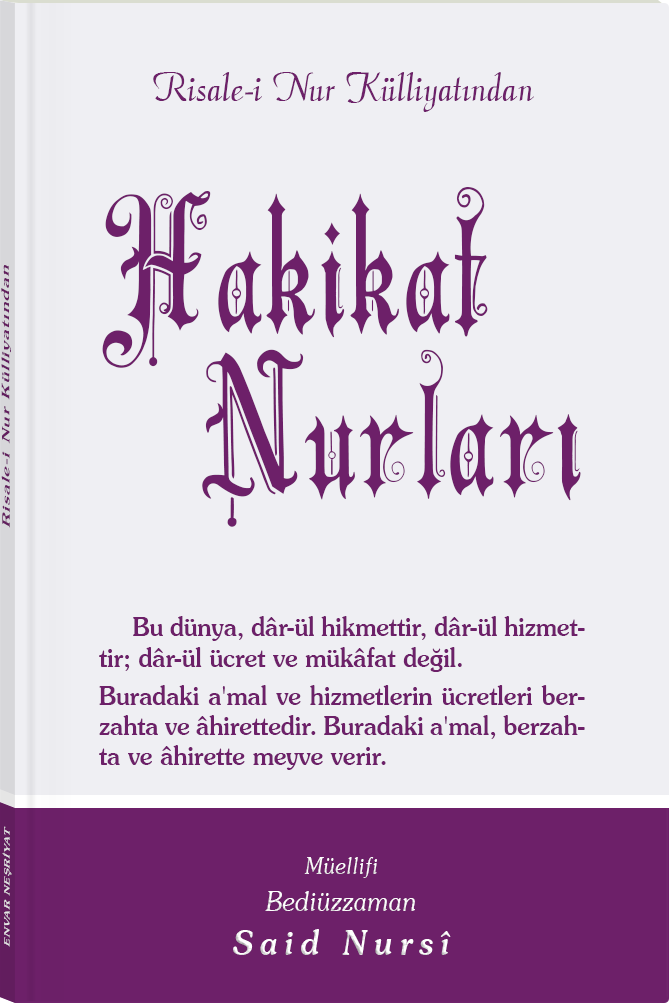
<style>
.page{position:relative;width:669px;height:1003px;background:#efeff3}
.page>*{position:absolute;margin:0}
.t1{font:45.3px "Barla © 072 Aria ScriptScriptSSi";color:#6d2069;scale:0.94 1}
.t2{font:183px/163.3px "Barla © 001 Liva Nur";letter-spacing:-0.001em;color:#6d2069;scale:0.92 1}
.t3{font:11.4px "Souvenir-Medium";letter-spacing:0.08em;color:#6d2069;scale:1.65 1}
.t4{font:25.9px/30.2px "Souvenir-Medium";color:#6d2069;scale:0.92 1}
.t5{font:25.9px/38.4px "Souvenir-Medium";color:#6d2069;scale:0.92 1}
.t6{font:8.3px "Souvenir-Medium";letter-spacing:0.08em;color:#e5e5e5;scale:1.43 1}
.t7{font:27.1px/37.8px "Souvenir-LightItalic";color:#ffffff;scale:0.92 1}
.t8{font:22.8px/39.8px "Souvenir-LightItalic";color:#ffffff;scale:0.92 1}
.t9{font:33.9px/43.8px "Souvenir-MediumItalic";letter-spacing:0.2em;color:#ffffff;scale:0.92 1}
</style>
<div class="page">
<p class="t1" style="left:153px;top:72px;width:381px;height:40px">Risale-i Nur Külliyatından</p>
<p class="t2" style="left:102px;top:187px;width:479px;height:340px;text-align:center">Hakikat<br>      Nurları</p>
<p class="t3" style="left:1px;top:265px;width:10px;height:263px;rotate:-90deg">Risale-i Nur Külliyatından</p>
<p class="t4" style="left:99px;top:616px;width:486px;height:154px;text-align:justify">Bu dünya, dâr-ül hikmettir, dâr-ül hizmettir; dâr-ül ücret ve mükâfat değil.     <span class="t5">Buradaki </span>a'mal ve hizmetlerin ücretleri berzahta ve âhirettedir. Buradaki a'mal, berzahta ve âhirette meyve verir.</p>
<p class="t6" style="left:2px;top:826px;width:10px;height:121px;rotate:-90deg">ENVAR NEŞRİYAT</p>
<p class="t7" style="left:233px;top:857px;width:218px;height:98px;text-align:center"><span class="t8">Müellifi<br></span>Bediüzzaman<br><span class="t9">Said Nursî</span></p>
</div>
